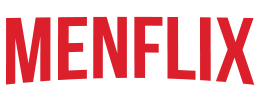
<style>
.page{position:relative;width:258px;height:98px;background:#ffffff}
.page>*{position:absolute;margin:0}
.t1{font:96px "BebasNeue-Bold";color:#db202c}
</style>
<div class="page">
<p class="t1" style="left:6px;top:16px;width:249px;height:69px">MENFLıX</p>
</div>
